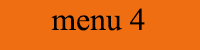
<style>
.page{position:relative;width:200px;height:50px;background:#ee6e11}
.page>*{position:absolute;margin:0}
.t1{font:48px "AngsanaNew";color:#000000}
</style>
<div class="page">
<p class="t1" style="left:51px;top:8px;width:94px;height:23px">menu 4</p>
</div>
